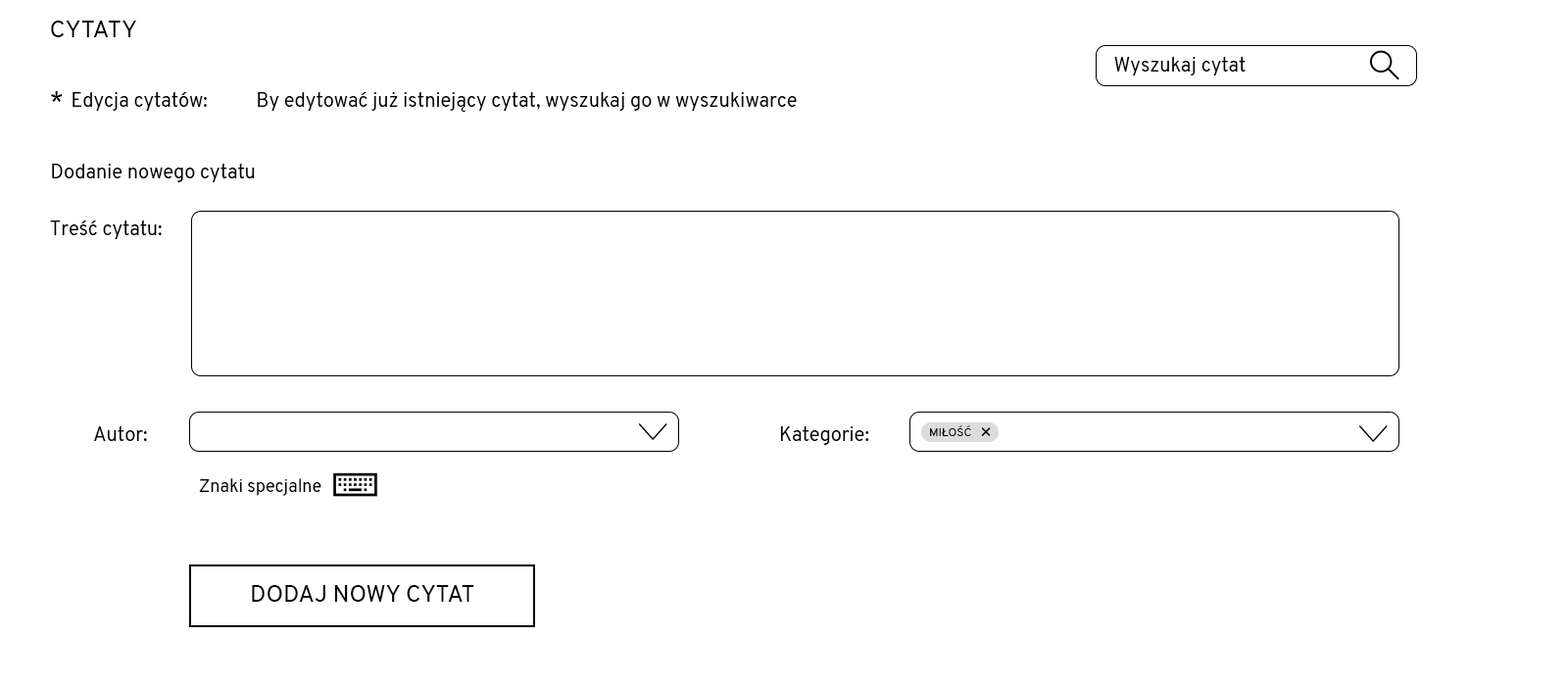
<style>
.page{position:relative;width:1568px;height:686px;background:#ffffff}
.page>*{position:absolute;margin:0}
.t1{font:24.5px "Overpass-Regular";color:#000000}
.t2{font:19.6px "Overpass-Regular";color:#000000}
.t3{font:26.5px "Overpass-Regular";color:#000000}
.t4{font:11.8px "Overpass-Regular";color:#000000}
.t5{font:17.6px "Overpass-Regular";color:#000000}
.t6{font:23.5px "Overpass-Regular";color:#000000}
</style>
<div class="page">
<p class="t1" style="left:51px;top:21px;width:85px;height:16px">CYTATY</p>
<p class="t2" style="left:1114px;top:56px;width:132px;height:19px">Wyszukaj cytat</p>
<p class="t3" style="left:51px;top:91px;width:12px;height:11px">*</p>
<p class="t2" style="left:73px;top:91px;width:134px;height:20px">Edycja cytatów:</p>
<p class="t2" style="left:258px;top:91px;width:539px;height:21px">By edytować już istniejący cytat, wyszukaj go w wyszukiwarce</p>
<p class="t2" style="left:52px;top:163px;width:203px;height:19px">Dodanie nowego cytatu</p>
<p class="t2" style="left:50px;top:220px;width:112px;height:19px">Treść cytatu:</p>
<p class="t2" style="left:94px;top:425px;width:53px;height:16px">Autor:</p>
<p class="t2" style="left:780px;top:425px;width:89px;height:20px">Kategorie:</p>
<p class="t4" style="left:930px;top:425px;width:41px;height:11px">MIŁOŚĆ</p>
<p class="t5" style="left:199px;top:478px;width:122px;height:18px">Znaki specjalne</p>
<p class="t6" style="left:252px;top:585px;width:222px;height:17px">DODAJ NOWY CYTAT</p>
</div>
